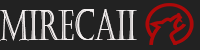
<style>
.page{position:relative;width:200px;height:50px;background:#222222}
.page>*{position:absolute;margin:0}
.t1{font:43.1px "Castellar";color:#f4efef;scale:0.62 1}
</style>
<div class="page">
<p class="t1" style="left:0px;top:9px;width:137px;height:32px">mirecaII</p>
</div>
